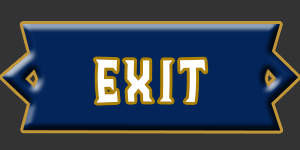
<style>
.page{position:relative;width:300px;height:150px;background:#032559}
.page>*{position:absolute;margin:0}
.t1{font:62.5px "Lorde-Havana";letter-spacing:0.1em;color:#ffffff;scale:0.75 1}
</style>
<div class="page">
<p class="t1" style="left:95px;top:59px;width:111px;height:44px">Exit</p>
</div>
